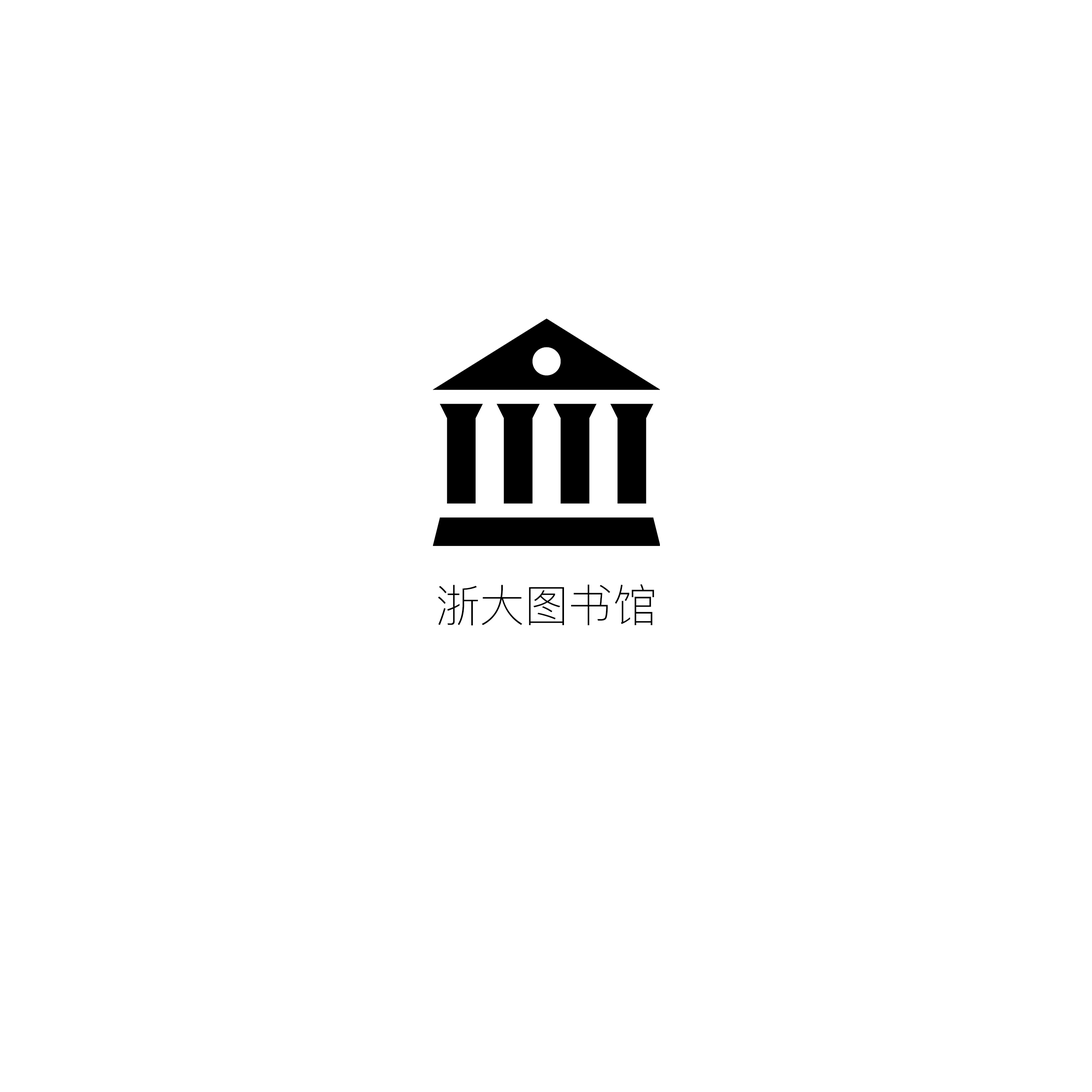
<style>
.page{position:relative;width:1092px;height:1092px;background:#ffffff}
.page>*{position:absolute;margin:0}
.t1{font:44.5px "PingFangSC-Thin";color:#000000;font-variant:small-caps}
</style>
<div class="page">
<p class="t1" style="left:438px;top:584px;width:216px;height:42px">浙大图书馆</p>
</div>
